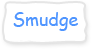
<style>
.page{position:relative;width:92px;height:49px;background:#ffffff}
.page>*{position:absolute;margin:0}
.t1{font:18px "ComicSansMS";color:#4f95ff}
</style>
<div class="page">
<p class="t1" style="left:13px;top:12px;width:65px;height:19px">Smudge</p>
</div>
